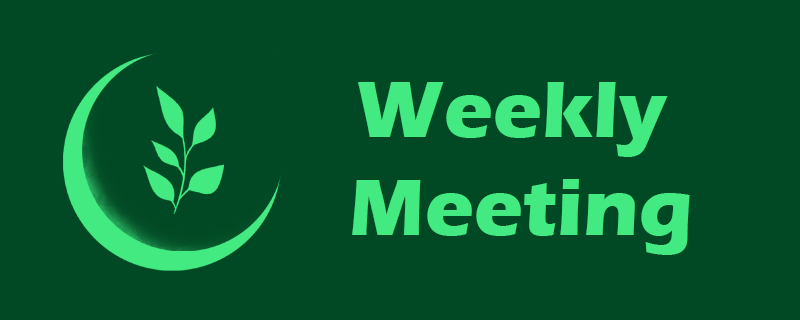
<style>
.page{position:relative;width:800px;height:320px;background:#014924}
.page>*{position:absolute;margin:0}
.t1{font:82.3px "ErasITC-Bold";color:#43ea81}
</style>
<div class="page">
<p class="t1" style="left:352px;top:82px;width:338px;height:173px;text-align:center">Weekly <br>Meeting</p>
</div>
